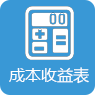
<style>
.page{position:relative;width:95px;height:95px;background:#3998d6}
.page>*{position:absolute;margin:0}
.t1{font:16px "MicrosoftYaHei";color:#ffffff}
</style>
<div class="page">
<p class="t1" style="left:9px;top:67px;width:80px;height:17px">成本收益表</p>
</div>
